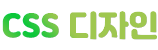
<style>
.page{position:relative;width:158px;height:50px;background:#ffffff}
.page>*{position:absolute;margin:0}
.t1{font:30px "Jalnan";color:#9fc750}
</style>
<div class="page">
<p class="t1" style="left:2px;top:11px;width:155px;height:29px">CSS 디자인</p>
</div>
